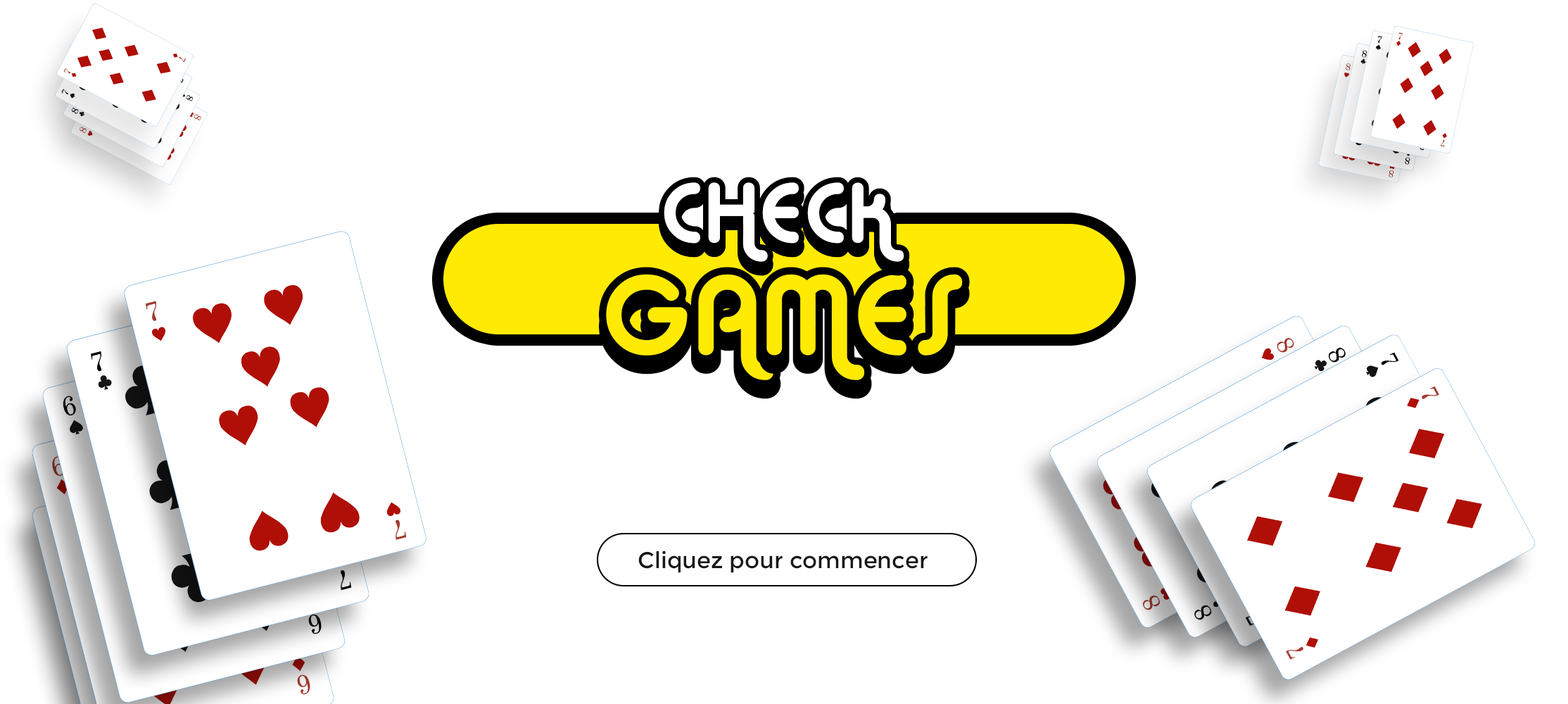
<style>
.page{position:relative;width:1568px;height:704px;background:#ffffff}
.page>*{position:absolute;margin:0}
.t1{font:84.5px "AlbaSuper";color:#000000;text-transform:uppercase}
.t2{font:113px "AlbaSuper";color:#000000;text-transform:uppercase}
.t3{font:22.7px "Montserrat-Regular";color:#181818}
</style>
<div class="page">
<p class="t1" style="left:659px;top:177px;width:251px;height:99px">Check</p>
<p class="t2" style="left:599px;top:267px;width:371px;height:132px">Games</p>
<p class="t3" style="left:638px;top:550px;width:290px;height:23px">Cliquez pour commencer</p>
</div>
